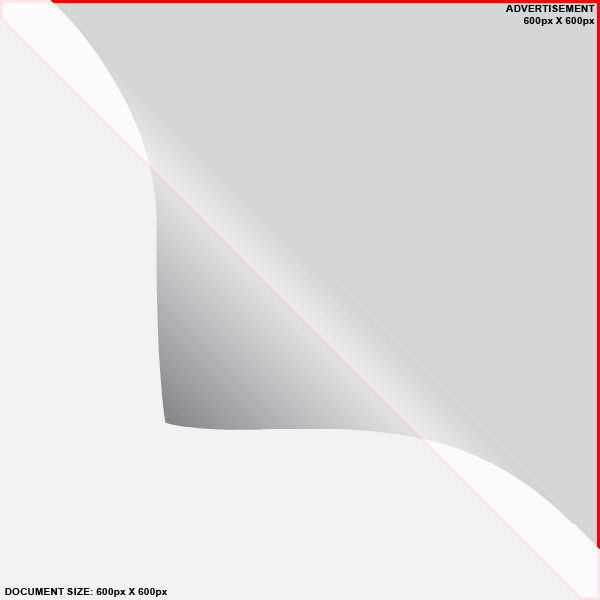
<style>
.page{position:relative;width:600px;height:600px;background:#d5d6d7}
.page>*{position:absolute;margin:0}
.t1{font:10px "Arial-BoldMT";color:#000000;text-transform:uppercase}
.t2{font:10px "Arial-BoldMT";color:#000000}
</style>
<div class="page">
<p class="t1" style="left:506px;top:5px;width:89px;height:21px;text-align:right">Advertisement<br><span class="t2">600px X 600px</span></p>
<p class="t1" style="left:5px;top:588px;width:162px;height:9px">Document size:<span class="t2"> 600px X 600px</span></p>
</div>
